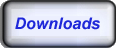
<style>
.page{position:relative;width:116px;height:48px}
.page>*{position:absolute;margin:0}
.t1{font:16px "Arial-BoldItalicMT";color:#1f28d9}
</style>
<div class="page">
<p class="t1" style="left:15px;top:17px;width:85px;height:13px">Downloads</p>
</div>
